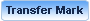
<style>
.page{position:relative;width:90px;height:21px}
.page>*{position:absolute;margin:0}
.t1{font:11px "Arial-BoldMT";color:#16294d}
</style>
<div class="page">
<p class="t1" style="left:6px;top:6px;width:77px;height:8px">Transfer Mark</p>
</div>
